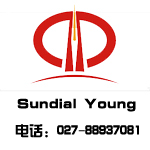
<style>
.page{position:relative;width:150px;height:150px;background:#ffffff}
.page>*{position:absolute;margin:0}
.t1{font:14px "ç»å¸ç»¼èºä½ç®-regular";color:#000000;scale:1.06 1}
.t2{font:14px "ç»å¸ç»¼èºä½ç®-regular";color:#000000}
</style>
<div class="page">
<p class="t1" style="left:17px;top:98px;width:119px;height:14px">Sundial Young</p>
<p class="t2" style="left:15px;top:124px;width:124px;height:14px">电话：027-88937081</p>
</div>
